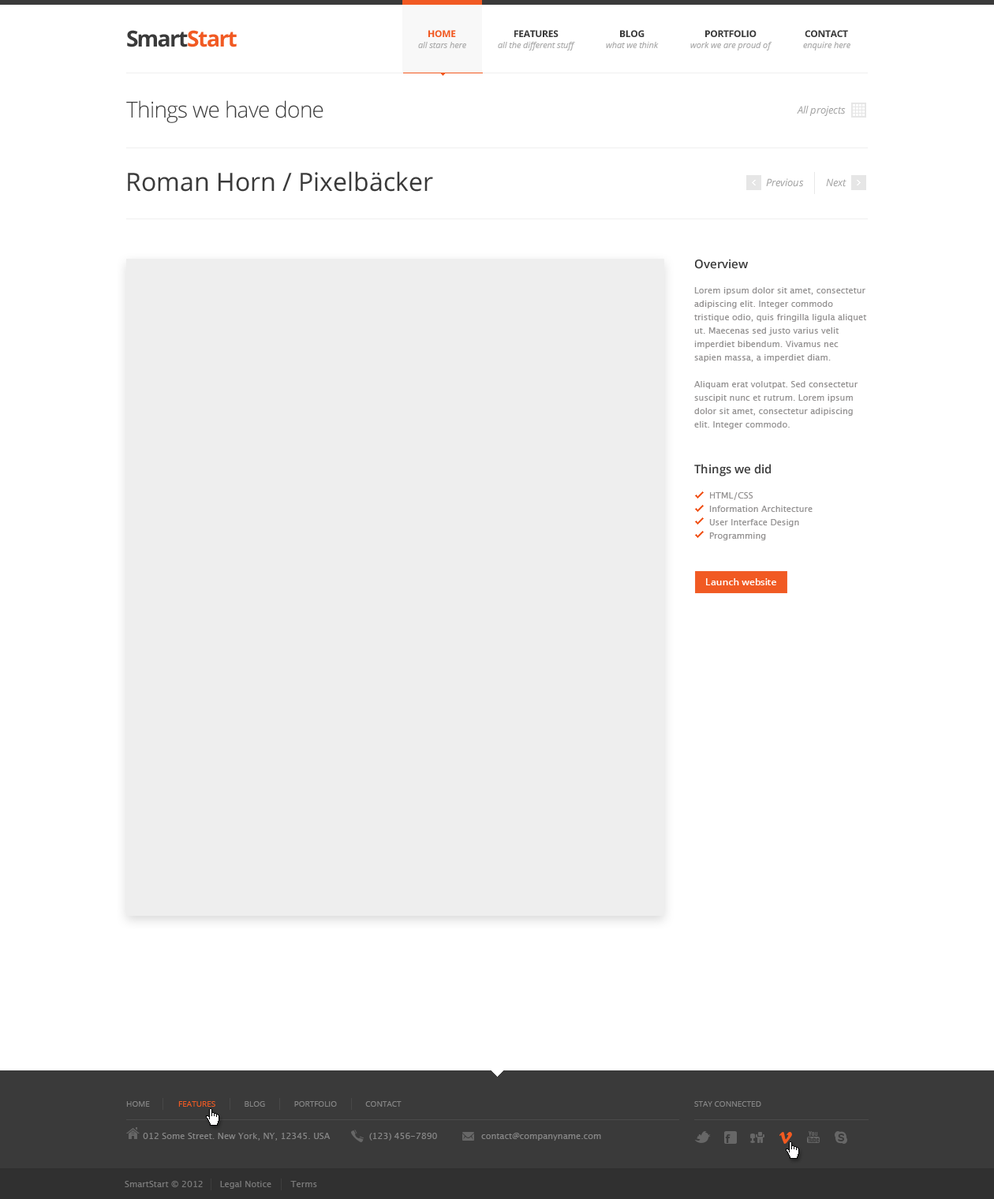
<style>
.page{position:relative;width:994px;height:1199px;background:#ffffff}
.page>*{position:absolute;margin:0}
.t1{font:22.1px "OpenSans-Bold";letter-spacing:-0.05em;color:#f15a23}
.t2{font:22.1px "OpenSans-Bold";letter-spacing:-0.075em;color:#3a3a3a}
.t3{font:22.1px "OpenSans-Bold";letter-spacing:-0.05em;color:#3a3a3a}
.t4{font:9.5px "OpenSans-Bold";letter-spacing:-0.025em;color:#f15a23;text-transform:uppercase}
.t5{font:9.5px "OpenSans-Bold";letter-spacing:-0.025em;color:#3a3a3a;text-transform:uppercase}
.t6{font:8.7px "OpenSans-Italic";letter-spacing:-0.01em;color:#aeaeae}
.t7{font:22.1px "OpenSans-Light";letter-spacing:-0.025em;color:#3a3a3a}
.t8{font:10.3px "OpenSans-Italic";color:#a1a1a1}
.t9{font:25.2px "OpenSans";color:#3a3a3a}
.t10{font:11.8px "OpenSans-Semibold";color:#3a3a3a}
.t11{font:8.7px/13.4px "LucidaSans";color:#959393}
.t12{font:9.5px "OpenSans-Semibold";letter-spacing:-0.01em;color:#ffffff}
.t13{font:7.9px "OpenSans";color:#868686;text-transform:uppercase}
.t14{font:7.9px "OpenSans";color:#f15a23;text-transform:uppercase}
.t15{font:8.7px "LucidaSans";color:#868686}
</style>
<div class="page">
<p class="t1" style="left:127px;top:30px;width:110px;height:17px"><span class="t2">S</span><span class="t3">mart</span>Start</p>
<p class="t4" style="left:428px;top:30px;width:28px;height:7px">Home</p>
<p class="t5" style="left:514px;top:30px;width:45px;height:7px">Features</p>
<p class="t5" style="left:620px;top:30px;width:25px;height:7px">Blog</p>
<p class="t5" style="left:705px;top:30px;width:52px;height:7px">Portfolio</p>
<p class="t5" style="left:805px;top:30px;width:43px;height:7px">Contact</p>
<p class="t6" style="left:418px;top:42px;width:48px;height:6px">all stars here</p>
<p class="t6" style="left:498px;top:42px;width:77px;height:8px">all the different stuff</p>
<p class="t6" style="left:606px;top:42px;width:53px;height:6px">what we think</p>
<p class="t6" style="left:690px;top:42px;width:82px;height:8px">work we are proud of</p>
<p class="t6" style="left:803px;top:42px;width:48px;height:8px">enquire here</p>
<p class="t7" style="left:126px;top:100px;width:198px;height:23px">Things we have done</p>
<p class="t8" style="left:797px;top:106px;width:49px;height:10px">All projects</p>
<p class="t9" style="left:128px;top:171px;width:305px;height:21px">Roman Horn / Pixelbäcker</p>
<p class="t8" style="left:766px;top:178px;width:38px;height:9px">Previous</p>
<p class="t8" style="left:826px;top:178px;width:21px;height:9px">Next</p>
<p class="t10" style="left:695px;top:259px;width:53px;height:10px">Overview</p>
<p class="t11" style="left:694px;top:287px;width:173px;height:142px">Lorem ipsum dolor sit amet, consectetur adipiscing elit. Integer commodo tristique odio, quis fringilla ligula aliquet ut. Maecenas sed justo varius velit imperdiet bibendum. Vivamus nec sapien massa, a imperdiet diam. <br><br>Aliquam erat volutpat. Sed consectetur suscipit nunc et rutrum. Lorem ipsum dolor sit amet, consectetur adipiscing elit. Integer commodo.</p>
<p class="t10" style="left:694px;top:464px;width:77px;height:13px">Things we did</p>
<p class="t11" style="left:709px;top:492px;width:104px;height:49px">HTML/CSS<br>Information Architecture<br>User Interface Design<br>Programming</p>
<p class="t12" style="left:706px;top:578px;width:70px;height:7px">Launch website</p>
<p class="t13" style="left:126px;top:1102px;width:276px;height:5px">Home              <span class="t14">Features</span>              Blog              Portfolio              Contact</p>
<p class="t13" style="left:694px;top:1102px;width:67px;height:5px">Stay connected</p>
<p class="t15" style="left:143px;top:1133px;width:188px;height:8px">012 Some Street. New York, NY, 12345. USA</p>
<p class="t15" style="left:369px;top:1133px;width:68px;height:8px">(123) 456-7890</p>
<p class="t15" style="left:481px;top:1133px;width:120px;height:8px">contact@companyname.com</p>
<p class="t15" style="left:125px;top:1181px;width:192px;height:8px;opacity:0.85">SmartStart © 2012      Legal Notice       Terms</p>
</div>
